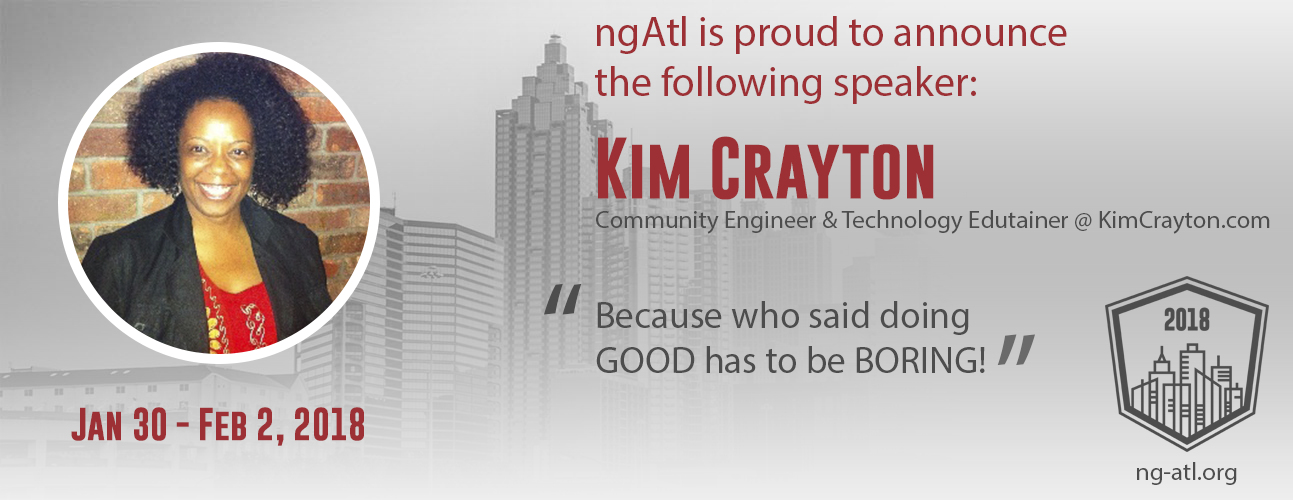
<style>
.page{position:relative;width:1293px;height:500px}
.page>*{position:absolute;margin:0}
.t1{font:41.7px "MyriadPro-Regular";color:#9d3035}
.t2{font:62.5px "GoboldBold";color:#9d3035}
.t3{font:25px "MyriadPro-Regular";color:#4d4d4e}
.t4{font:125px "MyriadPro-Regular";color:#4d4d4e}
.t5{font:37.5px "MyriadPro-Regular";color:#4d4d4e}
.t6{font:125px "MyriadPro-Regular";color:#6a6a6b}
.t7{font:33.3px "GoboldBold";color:#9d3035}
</style>
<div class="page">
<p class="t1" style="left:595px;top:16px;width:472px;height:88px">ngAtl is proud to announce the following speaker:</p>
<p class="t2" style="left:598px;top:136px;width:336px;height:64px">Kim Crayton</p>
<p class="t3" style="left:596px;top:210px;width:674px;height:24px">Community Engineer &amp; Technology Edutainer @ KimCrayton.com</p>
<p class="t4" style="left:544px;top:283px;width:38px;height:32px">“</p>
<p class="t5" style="left:596px;top:301px;width:389px;height:72px">Because who said doing GOOD has to be BORING!</p>
<p class="t6" style="left:997px;top:334px;width:38px;height:32px;rotate:180deg">“</p>
<p class="t7" style="left:71px;top:407px;width:293px;height:39px">Jan 30 - Feb 2, 2018</p>
<p class="t3" style="left:1137px;top:462px;width:100px;height:23px">ng-atl.org</p>
</div>
